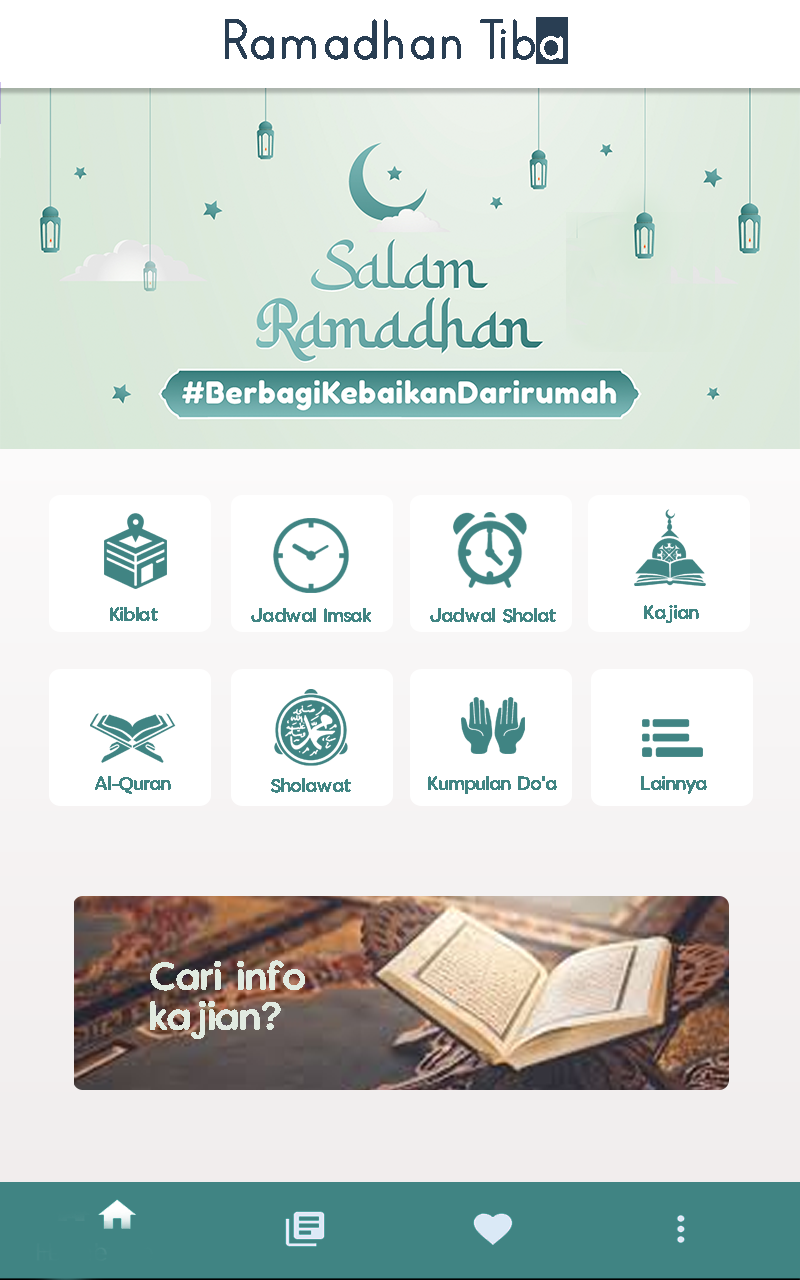
<style>
.page{position:relative;width:800px;height:1280px;background:#ffffff}
.page>*{position:absolute;margin:0}
.t1{font:66.4px "PrintBold";color:#293e53}
.t2{font:66.4px "PrintBold";color:#ffffff}
.t3{font:16px "VanillaExtractRegular";color:#408584}
.t4{font:33.4px "VanillaExtractRegular";color:#e1ebe1}
</style>
<div class="page">
<p class="t1" style="left:225px;top:19px;width:338px;height:41px">Ramadhan Tib<span class="t2">a</span></p>
<p class="t3" style="left:644px;top:605px;width:55px;height:18px">Kajian</p>
<p class="t3" style="left:110px;top:607px;width:48px;height:14px">Kiblat</p>
<p class="t3" style="left:251px;top:608px;width:120px;height:14px">Jadwal Imsak</p>
<p class="t3" style="left:430px;top:608px;width:126px;height:15px">Jadwal Sholat</p>
<p class="t3" style="left:95px;top:776px;width:76px;height:18px">Al-Quran</p>
<p class="t3" style="left:271px;top:778px;width:80px;height:15px">Sholawat</p>
<p class="t3" style="left:428px;top:776px;width:129px;height:18px">Kumpulan Do'a</p>
<p class="t3" style="left:641px;top:776px;width:66px;height:18px">Lainnya</p>
<p class="t4" style="left:150px;top:960px;width:155px;height:79px">Cari info<br>kajian?</p>
</div>
